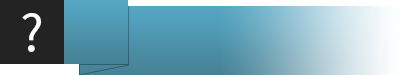
<style>
.page{position:relative;width:400px;height:75px}
.page>*{position:absolute;margin:0}
.t1{font:50px "NotoSansSC-Regular";color:#fffefe}
</style>
<div class="page">
<p class="t1" style="left:22px;top:13px;width:19px;height:39px">?</p>
</div>
